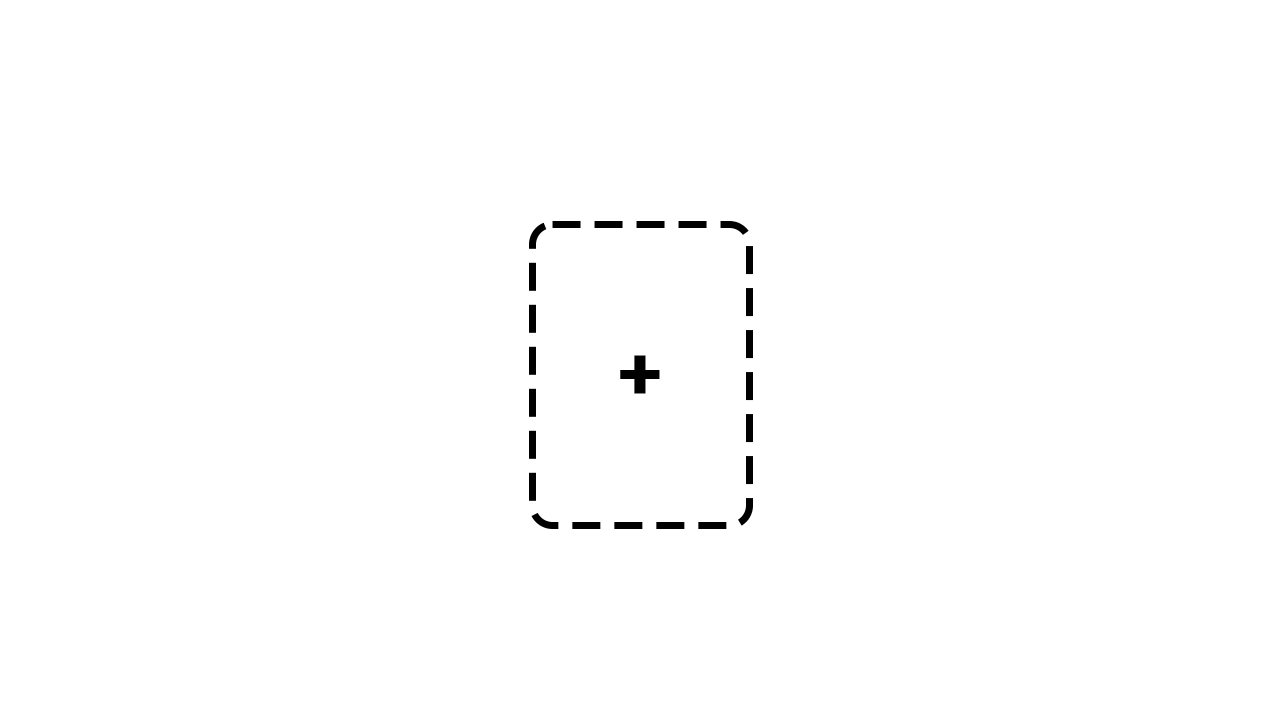
<style>
.page{position:relative;width:1280px;height:720px;background:#ffffff}
.page>*{position:absolute;margin:0}
.t1{font:72px "Oddlini-ExtraBold";color:#010101}
</style>
<div class="page">
<p class="t1" style="left:620px;top:355px;width:40px;height:39px">+</p>
</div>
